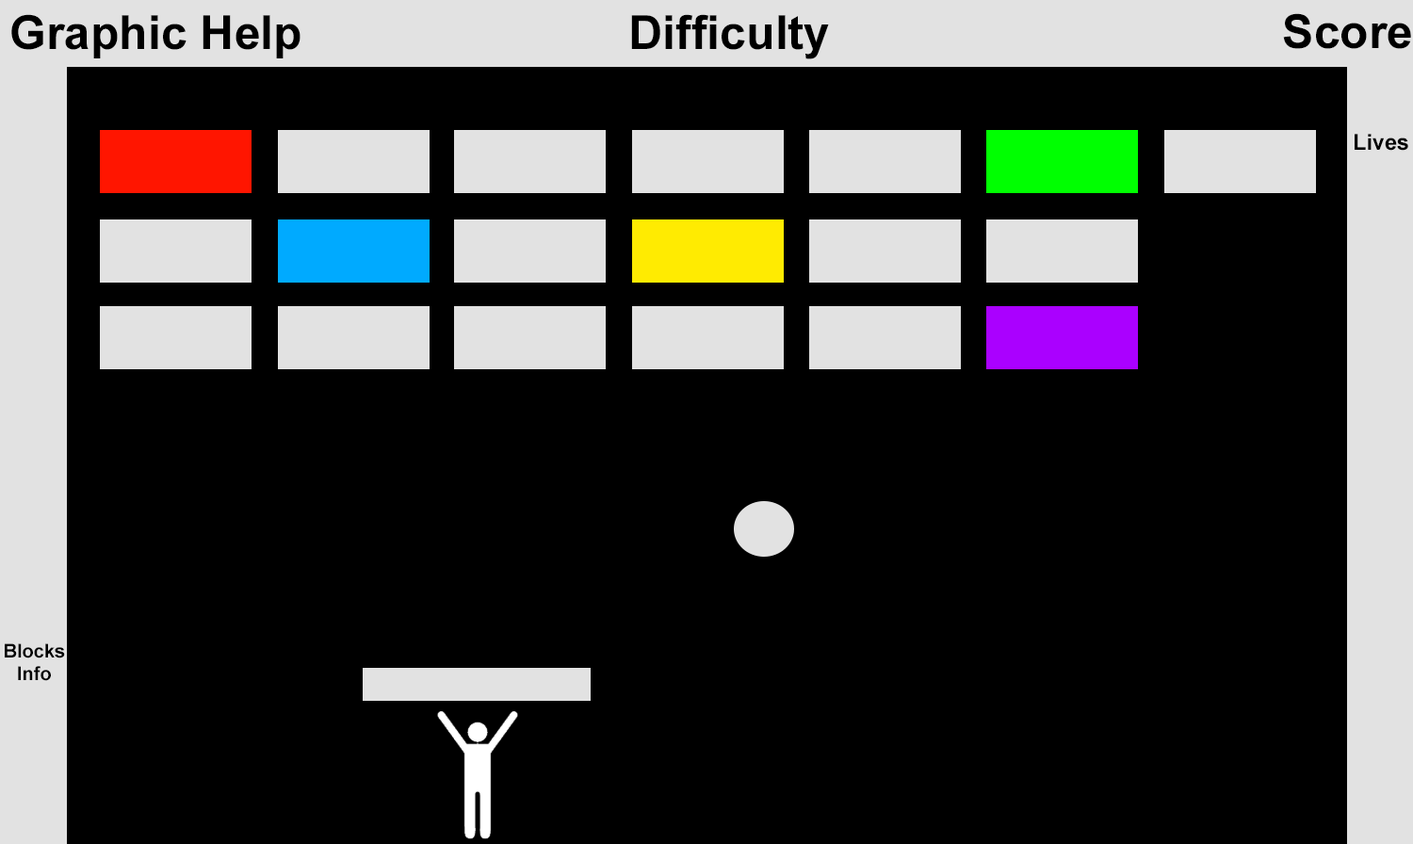
<style>
.page{position:relative;width:1413px;height:844px;background:#000000}
.page>*{position:absolute;margin:0}
.t1{font:47.1px "Arial-BoldMT";color:#000000}
.t2{font:22px "Arial-BoldMT";color:#000000}
.t3{font:18.8px "Arial-BoldMT";color:#000000}
</style>
<div class="page">
<p class="t1" style="left:11px;top:14px;width:289px;height:44px">Graphic Help</p>
<p class="t1" style="left:631px;top:14px;width:198px;height:45px">Difficulty</p>
<p class="t1" style="left:1283px;top:13px;width:128px;height:36px">Score</p>
<p class="t2" style="left:1354px;top:134px;width:54px;height:17px">Lives</p>
<p class="t3" style="left:5px;top:643px;width:60px;height:38px;text-align:center">Blocks<br>Info</p>
</div>
